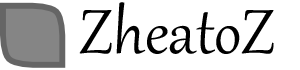
<style>
.page{position:relative;width:300px;height:70px;background:#ffffff}
.page>*{position:absolute;margin:0}
.t1{font:76.4px "Gabriola";color:#000000}
</style>
<div class="page">
<p class="t1" style="left:79px;top:2px;width:195px;height:52px">ZheatoZ</p>
</div>
